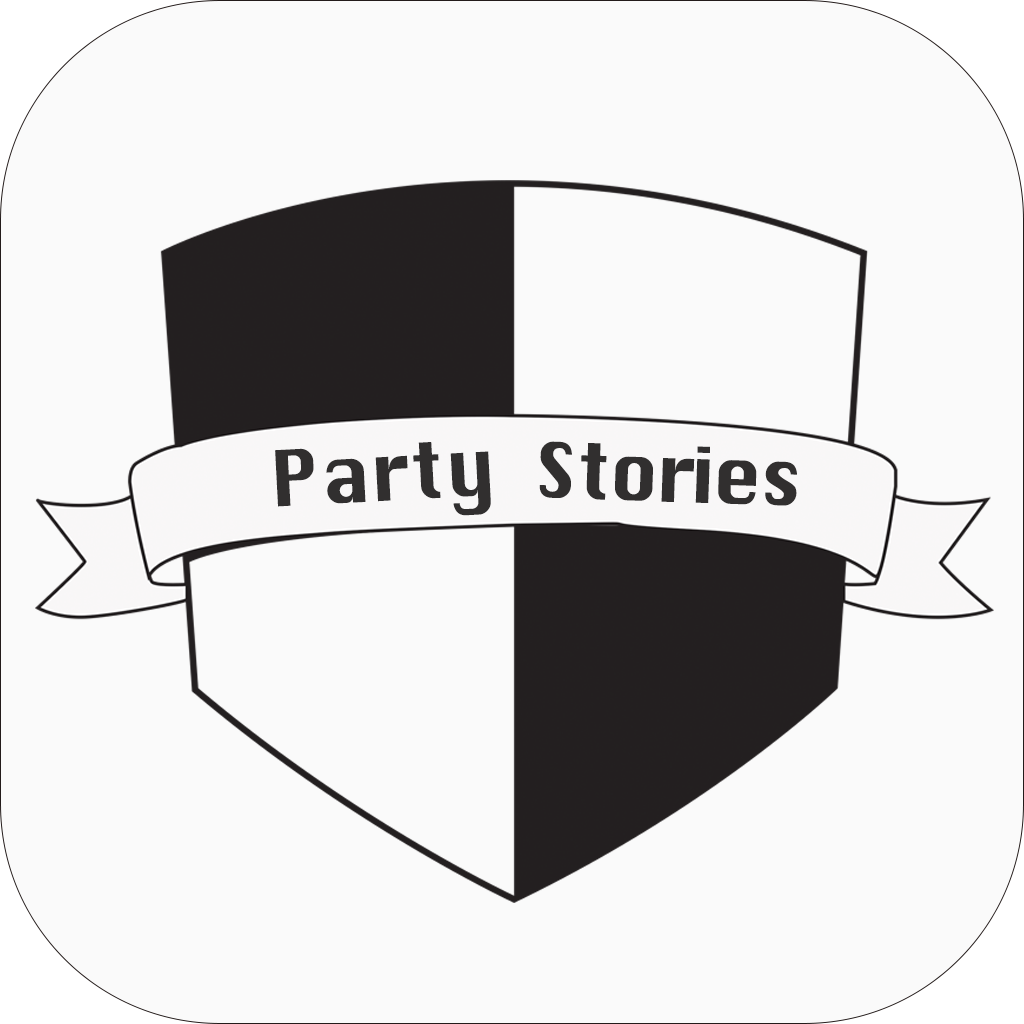
<style>
.page{position:relative;width:1024px;height:1024px;background:#fafafa}
.page>*{position:absolute;margin:0}
.t1{font:75px "Silom";color:#312f2f}
.t2{font:75px "Silom";letter-spacing:-0.04em;color:#312f2f}
</style>
<div class="page">
<p class="t1" style="left:275px;top:442px;width:216px;height:74px;rotate:-3deg">Party</p>
<p class="t2" style="left:539px;top:441px;width:258px;height:65px;rotate:2deg">Stories</p>
</div>
